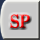
<style>
.page{position:relative;width:40px;height:40px;background:#c8c8c8}
.page>*{position:absolute;margin:0}
.t1{font:18px "MyungjoXB-HM"}
</style>
<div class="page">
<p class="t1" style="left:10px;top:14px;width:20px;height:14px">SP</p>
</div>
